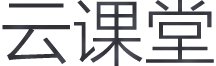
<style>
.page{position:relative;width:216px;height:66px;background:#ffffff}
.page>*{position:absolute;margin:0}
.t1{font:72px "MicrosoftYaHeiLight";color:#393941}
</style>
<div class="page">
<p class="t1" style="left:2px;top:0px;width:212px;height:66px">云课堂</p>
</div>
